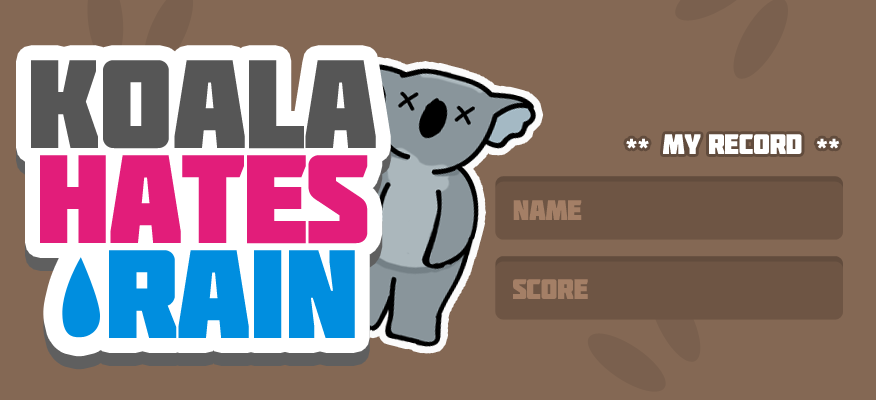
<style>
.page{position:relative;width:876px;height:400px;background:#846854}
.page>*{position:absolute;margin:0}
.t1{font:125.4px/94.7px "Molot";letter-spacing:-0.02em;color:#565656}
.t2{font:125.4px/94.7px "Molot";letter-spacing:-0.02em;color:#e21d7a}
.t3{font:125.4px/94.7px "Molot";letter-spacing:-0.02em;color:#008edf}
.t4{font:28.3px "Molot";letter-spacing:-0.02em;color:#ffffff}
.t5{font:28.3px "Molot";letter-spacing:-0.02em;color:#a47f66}
</style>
<div class="page">
<p class="t1" style="left:31px;top:60px;width:345px;height:278px;text-align:center">koala<br><span class="t2">hates<br> </span><span class="t3">rain</span></p>
<p class="t4" style="left:626px;top:134px;width:214px;height:20px">** MY Record **</p>
<p class="t5" style="left:513px;top:200px;width:69px;height:20px">name</p>
<p class="t5" style="left:513px;top:279px;width:75px;height:20px">score</p>
</div>
